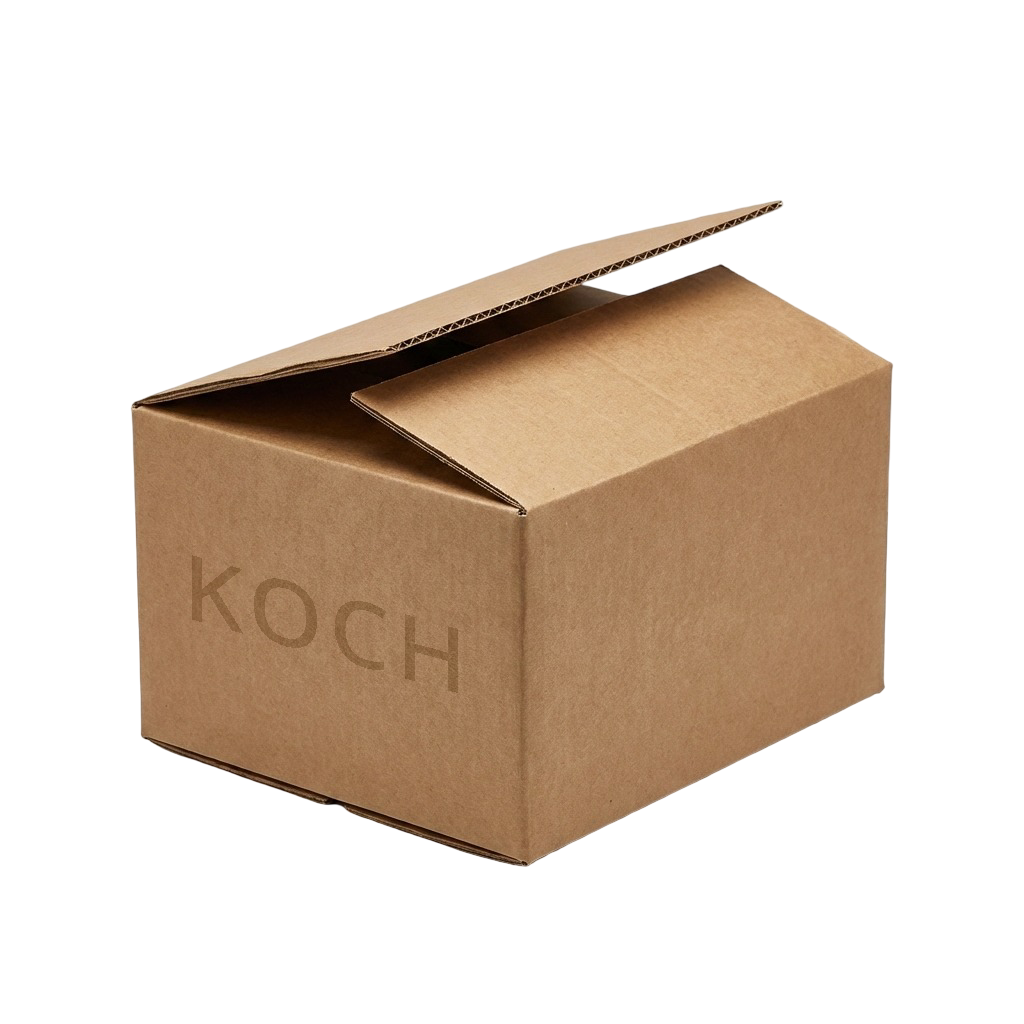
<style>
.page{position:relative;width:1024px;height:1024px;background:#ffffff}
.page>*{position:absolute;margin:0}
.t1{font:90px "NotoSansThai-Medium";letter-spacing:0.07em;color:#8d6641;scale:1.1 1}
</style>
<div class="page">
<p class="t1" style="left:192px;top:555px;width:266px;height:138px;rotate:15deg">KOCH</p>
</div>
